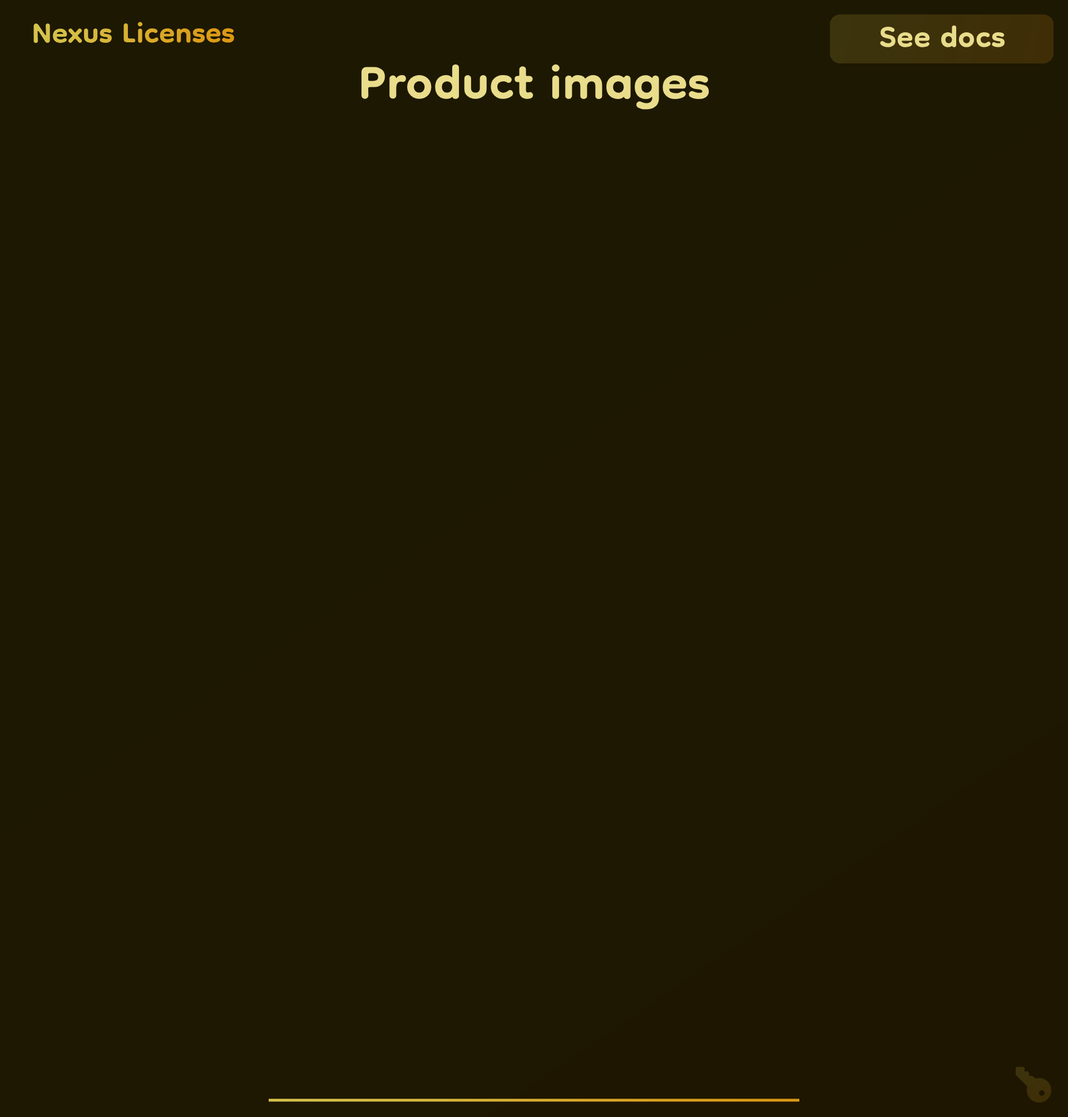
<style>
.page{position:relative;width:1068px;height:1117px;background:#1e1702}
.page>*{position:absolute;margin:0}
.t1{font:48.4px "Dongle-Bold";color:#e9dc8b}
.t2{font:76.7px "Dongle-Bold";color:#e9dc8b}
</style>
<div class="page">
<p class="t1" style="left:880px;top:25px;width:125px;height:22px">See docs</p>
<p class="t2" style="left:361px;top:64px;width:348px;height:46px">Product images</p>
</div>
